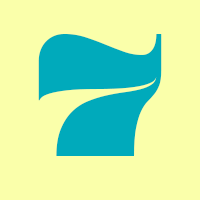
<style>
.page{position:relative;width:200px;height:200px;background:#faffaa}
.page>*{position:absolute;margin:0}
.t1{font:200px "Pompadour-Black";color:#00aabb}
</style>
<div class="page">
<p class="t1" style="left:38px;top:34px;width:124px;height:122px">7</p>
</div>
